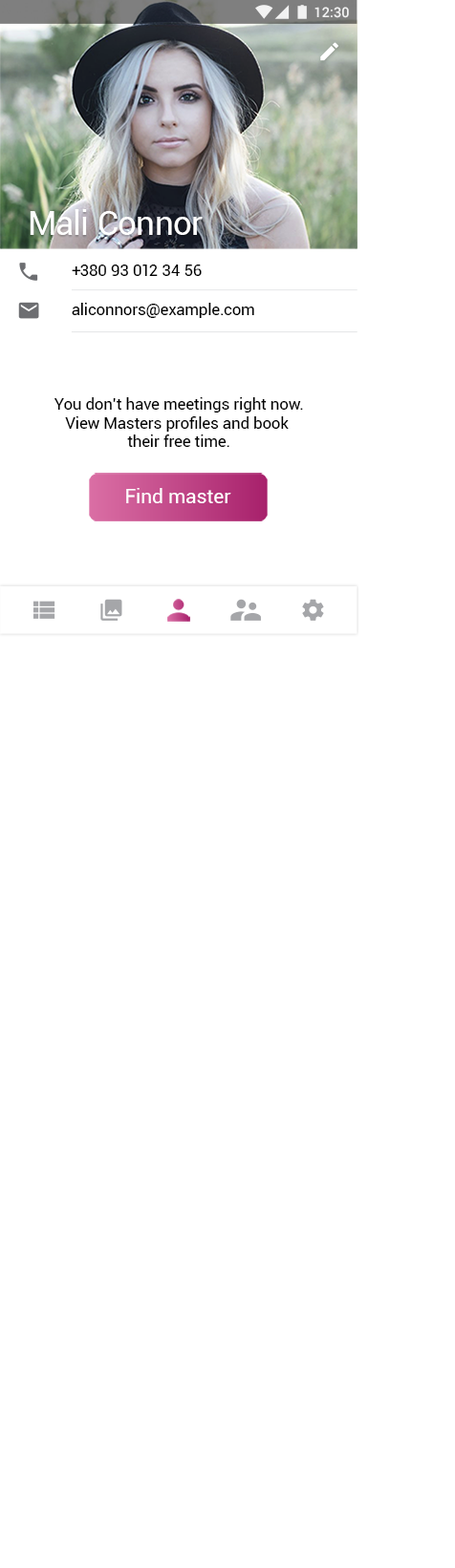
<style>
.page{position:relative;width:455px;height:1568px;background:#ffffff}
.page>*{position:absolute;margin:0}
.t1{font:13.9px "Roboto-Medium";color:#ffffff}
.t2{font:33.7px "Roboto-Regular";letter-spacing:-0.005em;color:#ffffff}
.t3{font:15.8px "Roboto-Regular";letter-spacing:0.01em;color:#000000}
.t4{font:15.8px "Roboto-Regular";color:#000000}
.t5{font:19.8px "Roboto-Regular";color:#ffffff}
</style>
<div class="page">
<p class="t1" style="left:314px;top:7px;width:35px;height:11px">12:30</p>
<p class="t2" style="left:30px;top:209px;width:172px;height:26px">Mali Connor</p>
<p class="t3" style="left:72px;top:265px;width:129px;height:11px">+380 93 012 34 56</p>
<p class="t3" style="left:72px;top:303px;width:182px;height:15px">aliconnors@example.com</p>
<p class="t4" style="left:54px;top:397px;width:249px;height:50px;text-align:center">You don’t have meetings right now.<br>View Masters profiles and book <br>their free time.</p>
<p class="t5" style="left:126px;top:488px;width:105px;height:15px">Find master</p>
</div>
